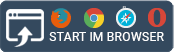
<style>
.page{position:relative;width:174px;height:52px;background:#34495e}
.page>*{position:absolute;margin:0}
.t1{font:12.5px "Roboto-Regular";color:#ffffff}
</style>
<div class="page">
<p class="t1" style="left:49px;top:32px;width:115px;height:9px">START IM BROWSER</p>
</div>
